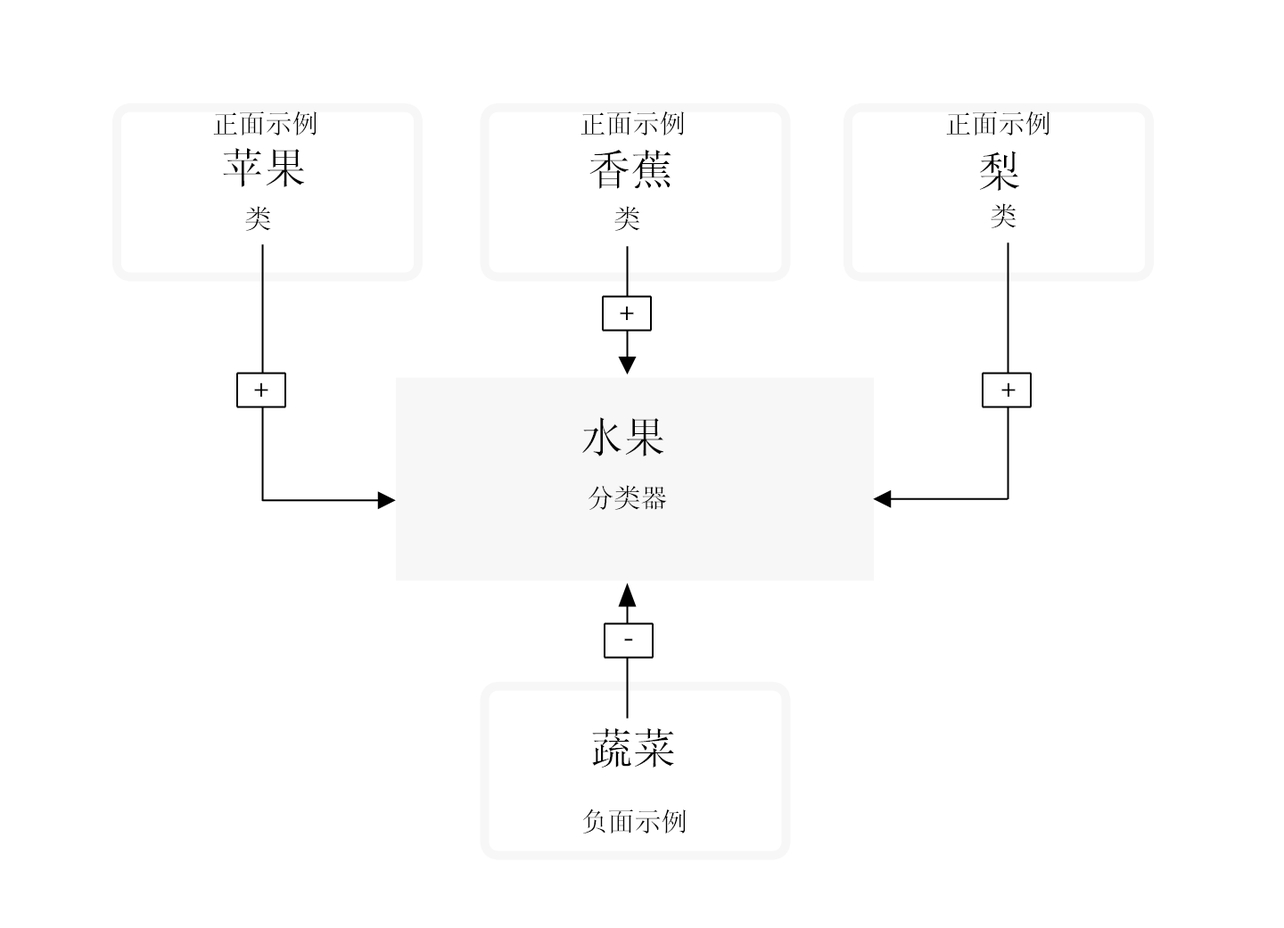
<style>
.page{position:relative;width:1284px;height:928px;background:#ffffff}
.page>*{position:absolute;margin:0}
.t1{font:26.8px "SimSun";color:#000000}
.t2{font:42.8px "SimSun";color:#000000}
.t3{font:26.8px "HelvNeueforIBM";color:#000000}
</style>
<div class="page">
<p class="t1" style="left:213px;top:111px;width:104px;height:25px">正面示例</p>
<p class="t1" style="left:581px;top:111px;width:103px;height:25px">正面示例</p>
<p class="t1" style="left:946px;top:111px;width:104px;height:25px">正面示例</p>
<p class="t2" style="left:223px;top:148px;width:82px;height:39px">苹果</p>
<p class="t2" style="left:590px;top:149px;width:82px;height:40px">香蕉</p>
<p class="t2" style="left:980px;top:151px;width:39px;height:40px">梨</p>
<p class="t1" style="left:245px;top:206px;width:26px;height:25px">类</p>
<p class="t1" style="left:615px;top:206px;width:25px;height:25px">类</p>
<p class="t1" style="left:991px;top:203px;width:26px;height:25px">类</p>
<p class="t3" style="left:620px;top:306px;width:14px;height:14px">+</p>
<p class="t3" style="left:254px;top:383px;width:14px;height:14px">+</p>
<p class="t3" style="left:1002px;top:383px;width:14px;height:14px">+</p>
<p class="t2" style="left:582px;top:417px;width:82px;height:40px">水果</p>
<p class="t1" style="left:589px;top:485px;width:78px;height:25px">分类器</p>
<p class="t3" style="left:624px;top:639px;width:9px;height:2px">-</p>
<p class="t2" style="left:592px;top:728px;width:82px;height:40px">蔬菜</p>
<p class="t1" style="left:583px;top:809px;width:103px;height:26px">负面示例</p>
</div>
